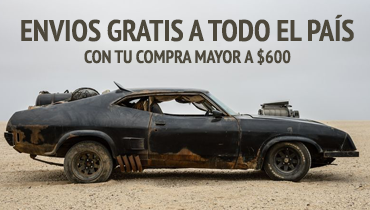
<style>
.page{position:relative;width:370px;height:210px}
.page>*{position:absolute;margin:0}
.t1{font:30px "PTSans-NarrowBold";color:#4d483b}
.t2{font:18px "PTSans-NarrowBold";color:#4d483b}
</style>
<div class="page">
<p class="t1" style="left:21px;top:14px;width:333px;height:28px">ENVIOS GRATIS A TODO EL PAÍS</p>
<p class="t2" style="left:84px;top:48px;width:207px;height:17px">CON TU COMPRA MAYOR A $600</p>
</div>
